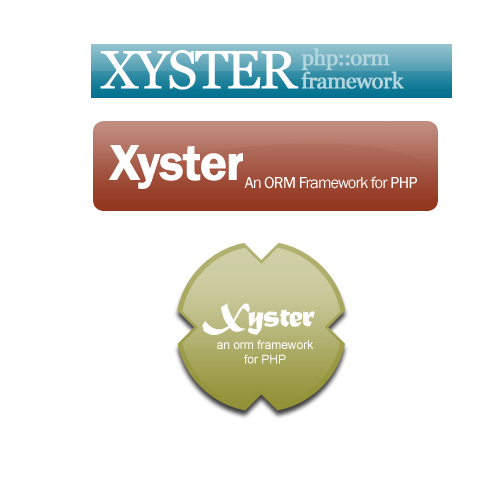
<style>
.page{position:relative;width:500px;height:500px;background:#ffffff}
.page>*{position:absolute;margin:0}
.t1{font:53.5px "Georgia";letter-spacing:-0.065em;color:#ffffff;font-weight:bold}
.t2{font:22px/23.4px "Georgia";letter-spacing:-0.05em;color:#b5d5de;font-weight:bold}
.t3{font:51.7px "FranklinGothic-Demi";letter-spacing:-0.05em;color:#ffffff;font-weight:bold}
.t4{font:16.4px "FranklinGothic-Book";letter-spacing:-0.05em;color:#ffffff}
.t5{font:34.9px "MaturaMTScriptCapitals";letter-spacing:-0.05em;color:#ffffff}
.t6{font:12px "ArialMT";color:#ffffff}
</style>
<div class="page">
<p class="t1" style="left:100px;top:50px;width:199px;height:40px">XYSTER</p>
<p class="t2" style="left:301px;top:48px;width:103px;height:41px">php::orm<br>framework</p>
<p class="t3" style="left:109px;top:145px;width:134px;height:44px">Xyster</p>
<p class="t4" style="left:244px;top:176px;width:173px;height:13px">An ORM Framework for PHP</p>
<p class="t5" style="left:202px;top:303px;width:113px;height:32px">Xyster</p>
<p class="t6" style="left:217px;top:340px;width:97px;height:24px;text-align:center">an orm framework<br>for PHP</p>
</div>
